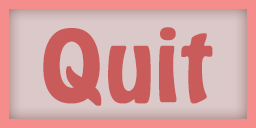
<style>
.page{position:relative;width:256px;height:128px;background:#dbc8c8}
.page>*{position:absolute;margin:0}
.t1{font:86.3px "HoboStd";color:#c95b5b;font-weight:bold}
</style>
<div class="page">
<p class="t1" style="left:43px;top:27px;width:170px;height:79px">Quit</p>
</div>
